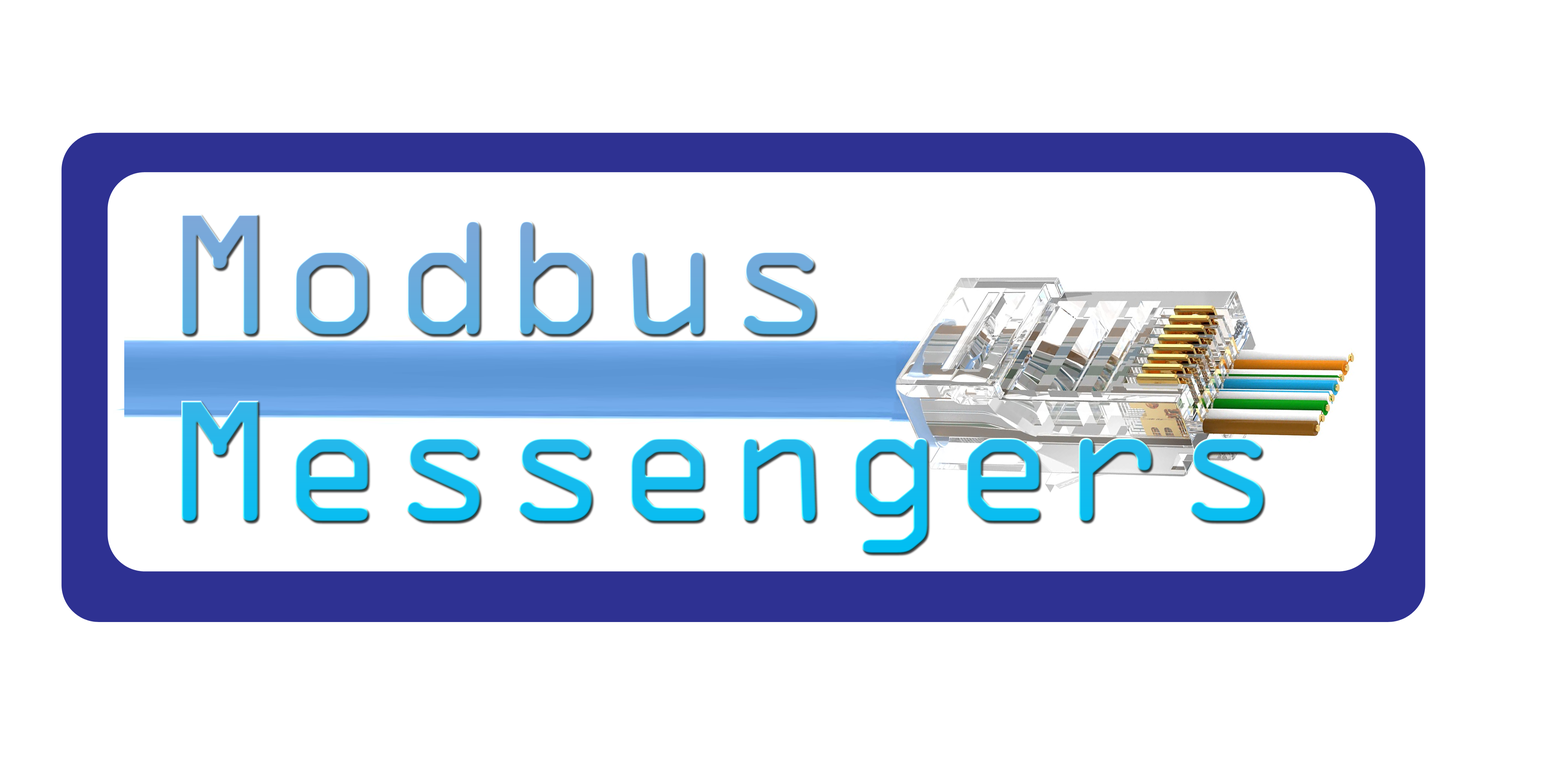
<style>
.page{position:relative;width:1547px;height:771px;background:#ffffff}
.page>*{position:absolute;margin:0}
.t1{font:155.5px "OCRAStd"}
</style>
<div class="page">
<p class="t1" style="left:181px;top:214px;width:1083px;height:339px">Modbus<br>Messengers</p>
</div>
